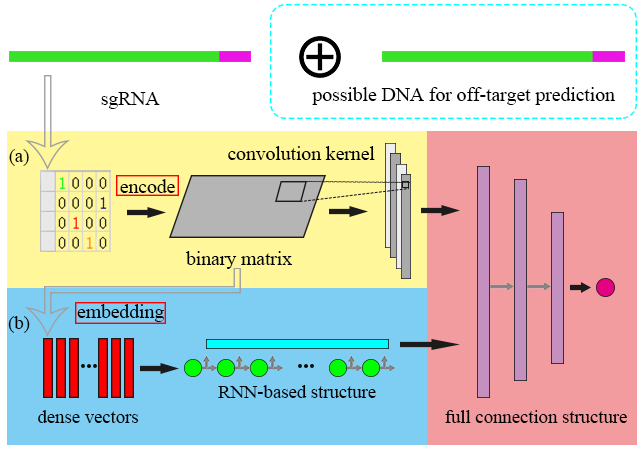
<style>
.page{position:relative;width:643px;height:451px;background:#ffffff}
.page>*{position:absolute;margin:0}
.t1{font:19.6px "TimesNewRomanPSMT";color:#000000}
.t2{font:18.7px "TimesNewRomanPSMT";color:#000000}
</style>
<div class="page">
<p class="t1" style="left:312px;top:87px;width:303px;height:18px">possible DNA for off-target prediction</p>
<p class="t1" style="left:101px;top:92px;width:59px;height:17px">sgRNA</p>
<p class="t2" style="left:9px;top:149px;width:20px;height:17px">(a)</p>
<p class="t1" style="left:228px;top:146px;width:147px;height:14px">convolution kernel</p>
<p class="t1" style="left:120px;top:179px;width:55px;height:14px">encode</p>
<p class="t1" style="left:186px;top:251px;width:107px;height:18px">binary matrix</p>
<p class="t1" style="left:77px;top:304px;width:87px;height:18px">embedding</p>
<p class="t2" style="left:8px;top:316px;width:22px;height:17px">(b)</p>
<p class="t2" style="left:218px;top:385px;width:158px;height:13px">RNN-based structure</p>
<p class="t2" style="left:38px;top:410px;width:101px;height:13px">dense vectors</p>
<p class="t2" style="left:445px;top:410px;width:182px;height:13px">full connection structure</p>
</div>
